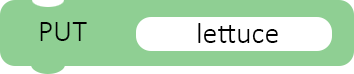
<style>
.page{position:relative;width:354px;height:74px;background:#8fcf93}
.page>*{position:absolute;margin:0}
.t1{font:30px "Calibri-Light";color:#000000}
</style>
<div class="page">
<p class="t1" style="left:40px;top:22px;width:47px;height:19px">PUT</p>
<p class="t1" style="left:198px;top:23px;width:80px;height:20px">lettuce</p>
</div>
